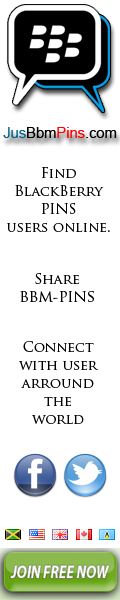
<style>
.page{position:relative;width:120px;height:600px;background:#ffffff}
.page>*{position:absolute;margin:0}
.t1{font:15.4px "ArialMT";color:#ff0000;scale:0.95 1}
.t2{font:15.4px "ArialMT";color:#026586;scale:0.95 1}
.t3{font:15.4px "ArialMT";color:#010101;scale:0.95 1}
.t4{font:14px/18px "TrajanPro-Regular";color:#000000}
</style>
<div class="page">
<p class="t1" style="left:3px;top:127px;width:114px;height:11px"><span class="t2">Jus</span><span class="t3">Bbm</span>Pins<span class="t3">.com</span></p>
<p class="t4" style="left:7px;top:167px;width:103px;height:65px;text-align:center">Find <br>BlackBerry PINS<br>users online.</p>
<p class="t4" style="left:20px;top:273px;width:74px;height:29px;text-align:center">Share<br>BBM-PINS</p>
<p class="t4" style="left:19px;top:341px;width:80px;height:83px;text-align:center">Connect<br>with user<br>arround<br>the<br>world</p>
</div>
